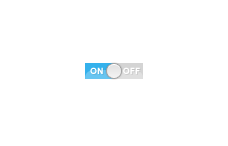
<style>
.page{position:relative;width:228px;height:146px;background:#ffffff}
.page>*{position:absolute;margin:0}
.t1{font:8.5px "Arial-BoldMT";color:#ffffff;text-transform:uppercase;scale:1.05 1}
.t2{font:8.5px "Arial-BoldMT";color:#ffffff;text-transform:uppercase}
</style>
<div class="page">
<p class="t1" style="left:90px;top:67px;width:13px;height:7px">on</p>
<p class="t2" style="left:123px;top:67px;width:17px;height:7px">off</p>
</div>
